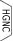
<style>
.page{position:relative;width:13px;height:41px;background:#fefefe}
.page>*{position:absolute;margin:0}
.t1{font:10px "Tahoma";letter-spacing:0.025em;color:#000000;scale:0.85 1}
</style>
<div class="page">
<p class="t1" style="left:0px;top:9px;width:11px;height:23px;rotate:90deg">HGNC</p>
</div>
